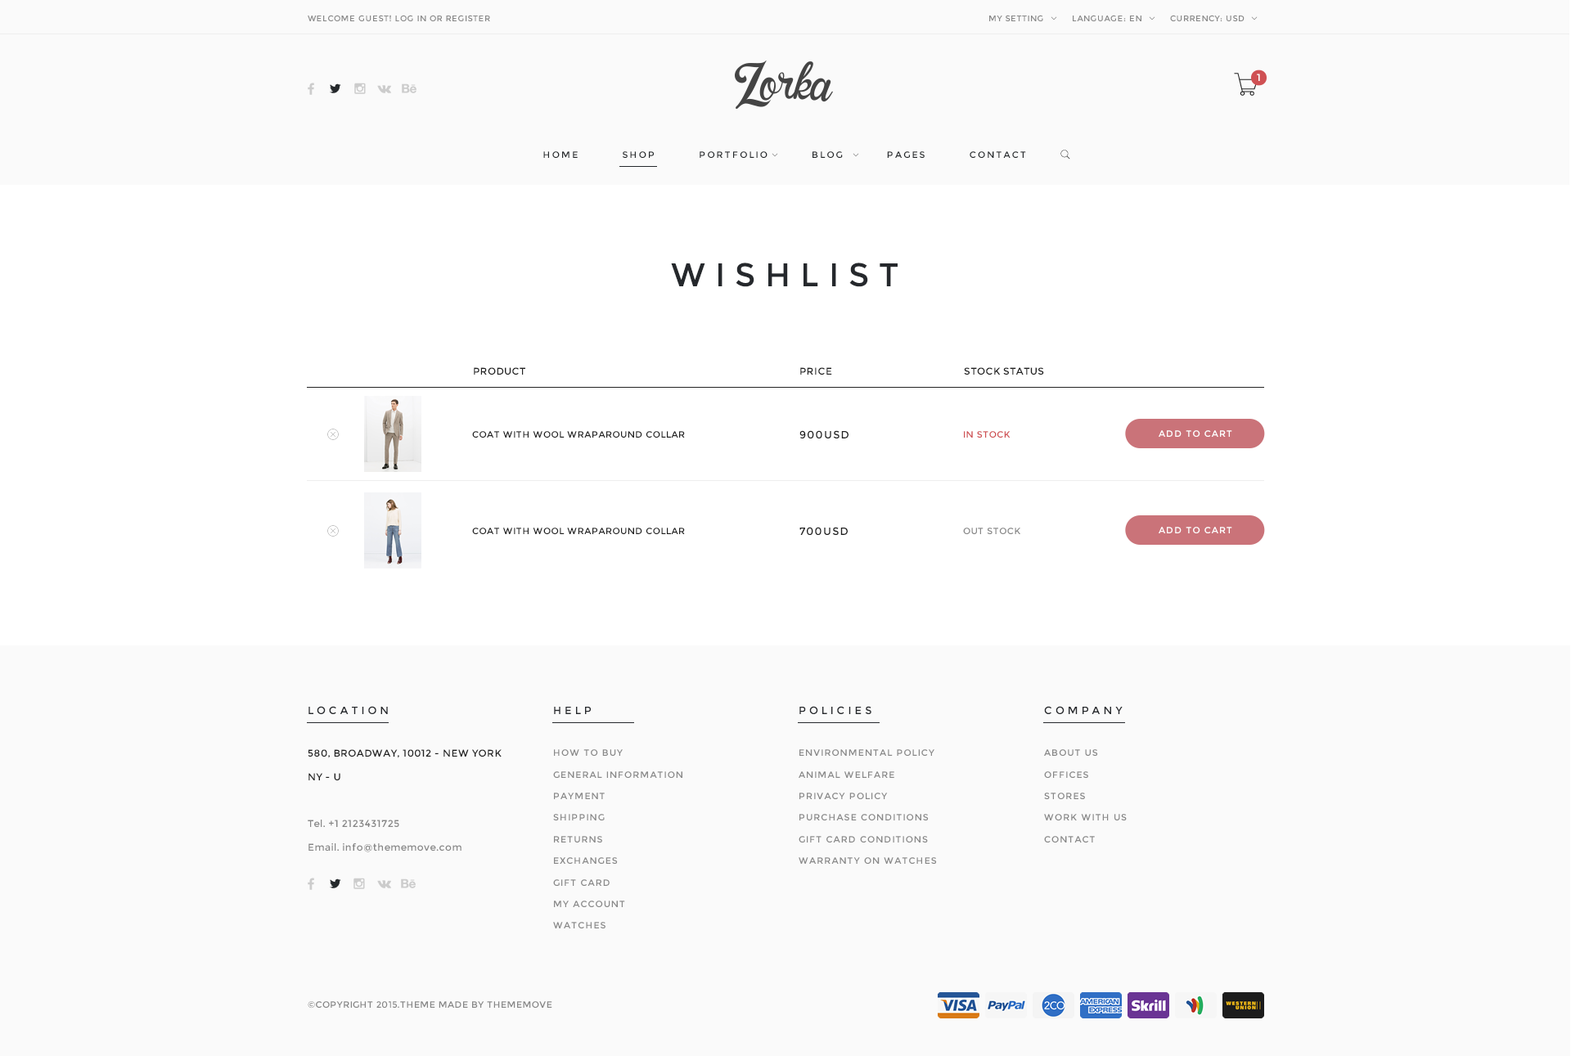
<style>
.page{position:relative;width:1571px;height:1056px;background:#fafafa}
.page>*{position:absolute;margin:0}
.t1{font:8.2px "Montserrat-Regular";letter-spacing:0.05em;color:#888888}
.t2{font:9.8px "Montserrat-Regular";letter-spacing:0.3em;color:#ffffff}
.t3{font:9px "Montserrat-Regular";letter-spacing:0.2em;color:#25292c}
.t4{font:32.7px "Montserrat-Regular";letter-spacing:0.3em;color:#25282c}
.t5{font:9.8px "Montserrat-Regular";letter-spacing:0.04em;color:#222222}
.t6{font:9.8px "Montserrat-Regular";letter-spacing:0.04em;color:#212121}
.t7{font:9px "Montserrat-Regular";letter-spacing:0.05em;color:#212121}
.t8{font:10.6px "Montserrat-Regular";letter-spacing:0.1em;color:#222222}
.t9{font:9px "Montserrat-Regular";letter-spacing:0.05em;color:#cf5053}
.t10{font:9px "Montserrat-Regular";letter-spacing:0.1em;color:#ffffff}
.t11{font:10.6px "Montserrat-Regular";letter-spacing:0.1em;color:#212121}
.t12{font:9px "Montserrat-Regular";letter-spacing:0.05em;color:#888888}
.t13{font:10.6px "Montserrat-Regular";letter-spacing:0.3em;color:#25282c}
.t14{font:9.8px/23.6px "Montserrat-Regular";letter-spacing:0.04em;color:#868686}
.t15{font:9.8px/23.6px "Montserrat-Regular";letter-spacing:0.04em;color:#202020}
.t16{font:9px/21.6px "Montserrat-Regular";letter-spacing:0.1em;color:#888888}
.t17{font:9px/21.6px "Montserrat-Regular";letter-spacing:0.1em;color:#878787}
.t18{font:9px "Montserrat-Regular";letter-spacing:0.04em;color:#868686}
</style>
<div class="page">
<p class="t1" style="left:308px;top:15px;width:182px;height:6px">WELCOME GUEST! LOG IN OR REGISTER</p>
<p class="t1" style="left:989px;top:15px;width:54px;height:6px">MY SETTING</p>
<p class="t1" style="left:1073px;top:15px;width:68px;height:6px">LANGUAGE: EN</p>
<p class="t1" style="left:1170px;top:15px;width:74px;height:6px">CURRENCY: USD</p>
<p class="t2" style="left:1257px;top:74px;width:3px;height:7px">1</p>
<p class="t3" style="left:543px;top:151px;width:483px;height:7px">HOME          SHOP          PORTFOLIO          BLOG          PAGES          CONTACT</p>
<p class="t4" style="left:671px;top:263px;width:227px;height:24px">WISHLIST</p>
<p class="t5" style="left:474px;top:367px;width:51px;height:8px">PRODUCT</p>
<p class="t5" style="left:800px;top:367px;width:32px;height:8px">PRICE</p>
<p class="t6" style="left:964px;top:367px;width:80px;height:8px">STOCK STATUS</p>
<p class="t7" style="left:472px;top:431px;width:213px;height:7px">COAT WITH WOOL WRAPAROUND COLLAR</p>
<p class="t8" style="left:799px;top:430px;width:49px;height:9px">900USD</p>
<p class="t9" style="left:964px;top:431px;width:46px;height:7px">IN STOCK</p>
<p class="t10" style="left:1159px;top:430px;width:73px;height:7px">ADD TO CART</p>
<p class="t7" style="left:472px;top:528px;width:213px;height:6px">COAT WITH WOOL WRAPAROUND COLLAR</p>
<p class="t11" style="left:799px;top:527px;width:49px;height:8px">700USD</p>
<p class="t12" style="left:963px;top:528px;width:57px;height:6px">OUT STOCK</p>
<p class="t10" style="left:1159px;top:527px;width:73px;height:6px">ADD TO CART</p>
<p class="t13" style="left:308px;top:706px;width:80px;height:8px">LOCATION</p>
<p class="t13" style="left:554px;top:707px;width:37px;height:7px">HELP</p>
<p class="t13" style="left:799px;top:706px;width:72px;height:8px">POLICIES</p>
<p class="t13" style="left:1044px;top:706px;width:79px;height:8px">COMPANY</p>
<p class="t14" style="left:308px;top:749px;width:194px;height:104px"><span class="t15">580, BROADWAY, 10012 - NEW YORK <br>NY - U<br><br></span>Tel. +1 2123431725<br>Email. info@thememove.com</p>
<p class="t16" style="left:553px;top:749px;width:129px;height:180px">HOW TO BUY<br>GENERAL INFORMATION<br>PAYMENT<br>SHIPPING<br>RETURNS<br>EXCHANGES<br>GIFT CARD<br>MY ACCOUNT<br>WATCHES</p>
<p class="t16" style="left:799px;top:749px;width:138px;height:115px">ENVIRONMENTAL POLICY<br>ANIMAL WELFARE<br>PRIVACY POLICY<br>PURCHASE CONDITIONS<br>GIFT CARD CONDITIONS<br>WARRANTY ON WATCHES</p>
<p class="t17" style="left:1044px;top:749px;width:83px;height:94px">ABOUT US<br>OFFICES<br>STORES<br>WORK WITH US<br>CONTACT</p>
<p class="t18" style="left:308px;top:1001px;width:244px;height:8px">©COPYRIGHT 2015.THEME MADE BY THEMEMOVE</p>
</div>
